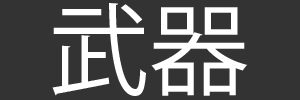
<style>
.page{position:relative;width:300px;height:100px;background:#333333}
.page>*{position:absolute;margin:0}
.t1{font:100px "KozGoPr6N-Regular";color:#ffffff}
</style>
<div class="page">
<p class="t1" style="left:52px;top:3px;width:196px;height:93px">武器</p>
</div>
